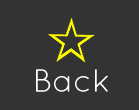
<style>
.page{position:relative;width:139px;height:110px;background:#333333}
.page>*{position:absolute;margin:0}
.t1{font:32px "Quicksand-Regular";color:#ffffff;scale:1.04 1}
</style>
<div class="page">
<p class="t1" style="left:36px;top:69px;width:72px;height:23px">Back</p>
</div>
